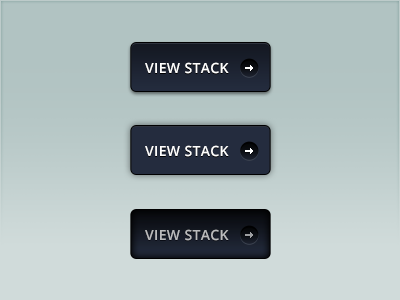
<style>
.page{position:relative;width:400px;height:300px}
.page>*{position:absolute;margin:0}
.t1{font:14px "OpenSans-Semibold";letter-spacing:0.025em;color:#ffffff;text-transform:uppercase}
.t2{font:14px "OpenSans-Semibold";letter-spacing:0.025em;color:#babbbd;text-transform:uppercase}
</style>
<div class="page">
<p class="t1" style="left:145px;top:62px;width:84px;height:12px">view stack</p>
<p class="t1" style="left:145px;top:145px;width:84px;height:12px">view stack</p>
<p class="t2" style="left:145px;top:229px;width:84px;height:12px">view stack</p>
</div>
